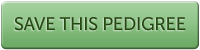
<style>
.page{position:relative;width:200px;height:50px}
.page>*{position:absolute;margin:0}
.t1{font:18px "MuseoSans-500";letter-spacing:-0.015em;color:#305d16}
</style>
<div class="page">
<p class="t1" style="left:14px;top:17px;width:172px;height:14px">SAVE THIS PEDIGREE</p>
</div>
